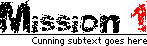
<style>
.page{position:relative;width:147px;height:46px;background:#ffffff}
.page>*{position:absolute;margin:0}
.t1{font:35.1px "SoulMission";color:#000000}
.t2{font:35.1px "SoulMission";color:#ff0000}
.t3{font:12px "Photoshop Small";color:#000000}
</style>
<div class="page">
<p class="t1" style="left:0px;top:0px;width:147px;height:33px">Mission <span class="t2">1</span></p>
<p class="t3" style="left:32px;top:37px;width:115px;height:9px">Cunning subtext goes here</p>
</div>
